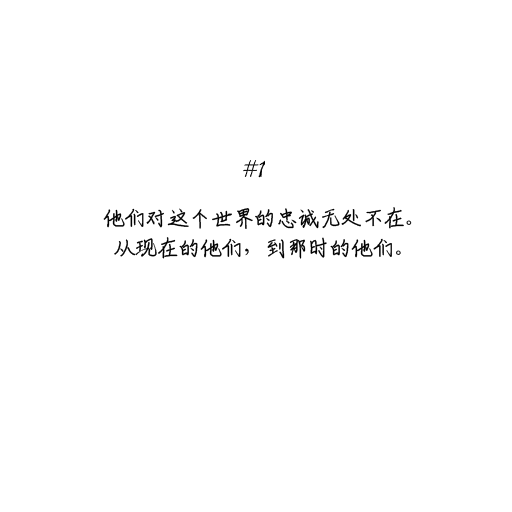
<style>
.page{position:relative;width:512px;height:512px;background:#ffffff}
.page>*{position:absolute;margin:0}
.t1{font:24px/30px "ShouShuti";letter-spacing:-0.1em;color:#000000}
</style>
<div class="page">
<p class="t1" style="left:103px;top:207px;width:309px;height:52px;text-align:center">他们对这个世界的忠诚无处不在。<br>从现在的他们，到那时的他们。</p>
</div>
